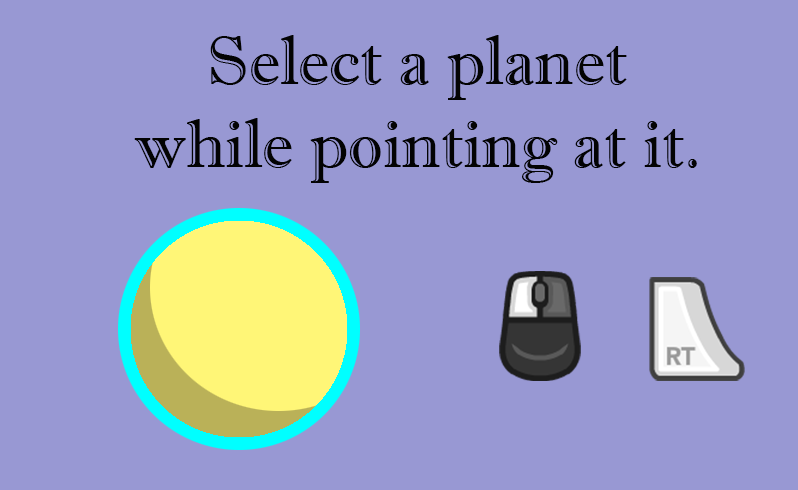
<style>
.page{position:relative;width:798px;height:490px;background:#9898d3}
.page>*{position:absolute;margin:0}
.t1{font:68.7px "ImprintMT-Shadow";color:#030303}
</style>
<div class="page">
<p class="t1" style="left:134px;top:35px;width:563px;height:148px;text-align:center">Select a planet<br>while pointing at it.</p>
</div>
